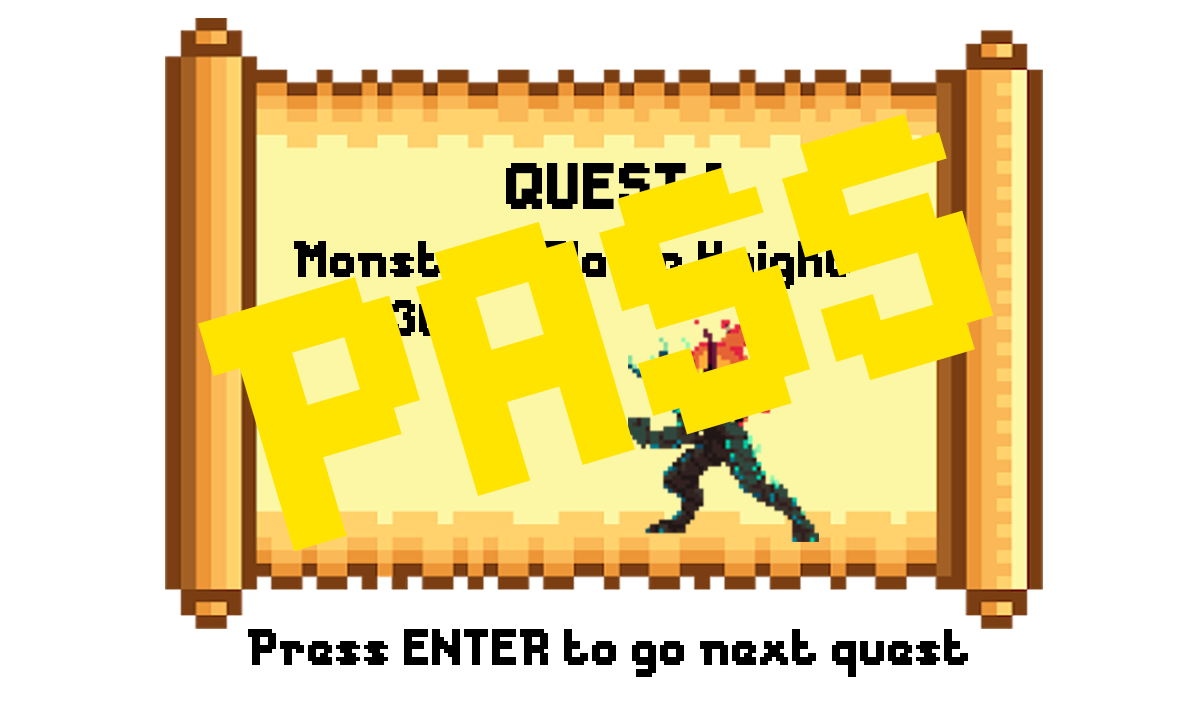
<style>
.page{position:relative;width:1200px;height:720px;background:#ffffff}
.page>*{position:absolute;margin:0}
.t1{font:327.3px "Messe-Duesseldorf";color:#ffe400}
.t2{font:61.3px "Messe-Duesseldorf";color:#000000}
.t3{font:48px "Messe-Duesseldorf"}
.t4{font:48px "Messe-Duesseldorf";color:#ffe400}
.t5{font:48px "Messe-Duesseldorf";color:#000000}
</style>
<div class="page">
<p class="t1" style="left:198px;top:113px;width:796px;height:439px;rotate:-17deg">PASS</p>
<p class="t2" style="left:506px;top:163px;width:216px;height:46px">QUEST 1</p>
<p class="t3" style="left:294px;top:241px;width:556px;height:48px">Monster : Flame Knight</p>
<p class="t4" style="left:295px;top:300px;width:148px;height:36px">HP : 30</p>
<p class="t5" style="left:248px;top:629px;width:720px;height:48px">Press ENTER to go next quest</p>
</div>
